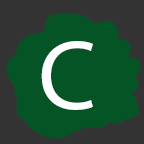
<style>
.page{position:relative;width:144px;height:144px;background:#045426}
.page>*{position:absolute;margin:0}
.t1{font:100px "MyriadPro-Regular";color:#ffffff}
</style>
<div class="page">
<p class="t1" style="left:41px;top:41px;width:52px;height:69px">C</p>
</div>
